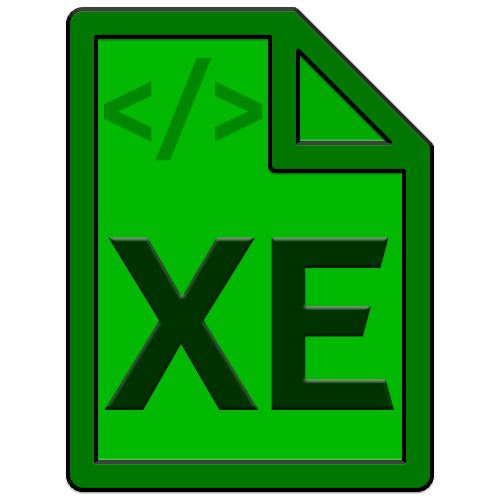
<style>
.page{position:relative;width:500px;height:500px;background:#ffffff}
.page>*{position:absolute;margin:0}
.t1{font:121.3px "TechnaSans-Regular";color:#008900}
.t2{font:250.7px "TechnaSans-Regular";color:#003200}
</style>
<div class="page">
<p class="t1" style="left:104px;top:57px;width:159px;height:104px">&lt;/&gt;</p>
<p class="t2" style="left:104px;top:237px;width:291px;height:173px">XE</p>
</div>
